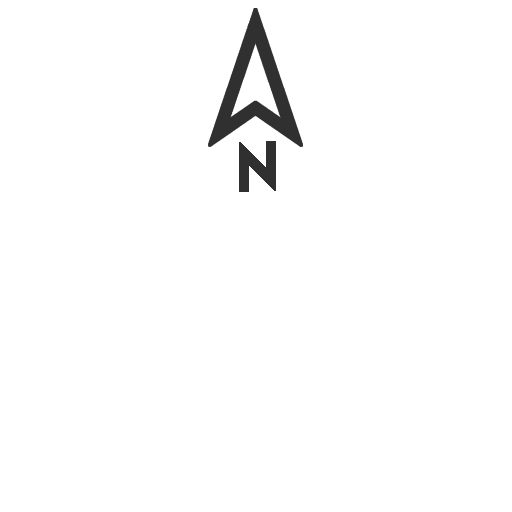
<style>
.page{position:relative;width:512px;height:512px;background:#ffffff}
.page>*{position:absolute;margin:0}
.t1{font:68.6px "AnaheimGothic";letter-spacing:0.02em;color:#303030}
</style>
<div class="page">
<p class="t1" style="left:239px;top:141px;width:37px;height:51px">N</p>
</div>
